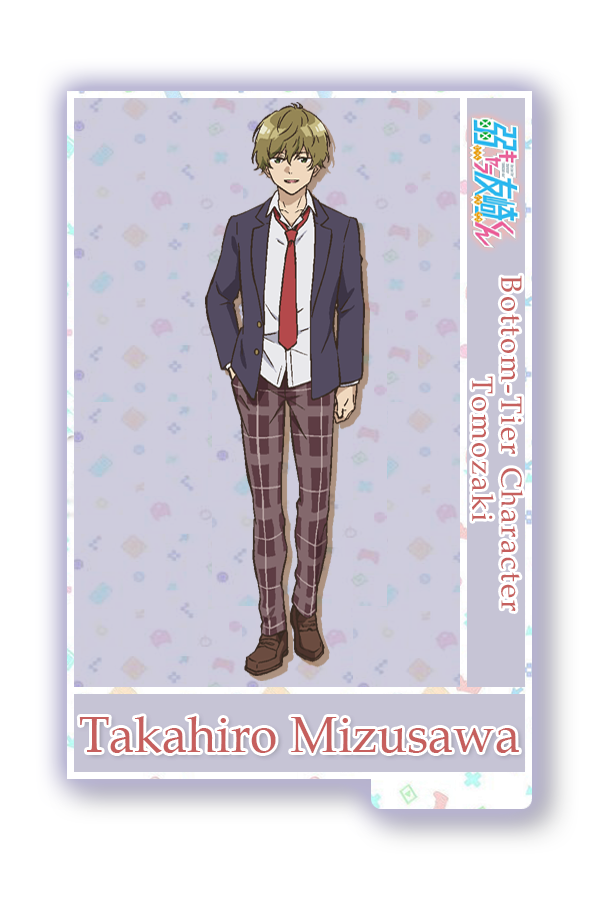
<style>
.page{position:relative;width:600px;height:900px;background:#ffffff}
.page>*{position:absolute;margin:0}
.t1{font:29.2px/29.2px "BookAntiqua";letter-spacing:0.08em;color:#c65f5d}
.t2{font:50px "BookAntiqua";color:#c65f5d}
</style>
<div class="page">
<p class="t1" style="left:471px;top:275px;width:52px;height:336px;text-align:center;rotate:90deg">Bottom-Tier Character <br>Tomozaki</p>
<p class="t2" style="left:79px;top:716px;width:440px;height:37px">Takahiro Mizusawa</p>
</div>
